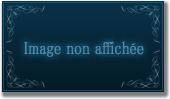
<style>
.page{position:relative;width:170px;height:99px}
.page>*{position:absolute;margin:0}
.t1{font:17.7px "MS-PMincho";color:#5488a6;font-weight:bold;scale:0.84 1}
</style>
<div class="page">
<p class="t1" style="left:24px;top:41px;width:120px;height:16px">Image non affichée</p>
</div>
